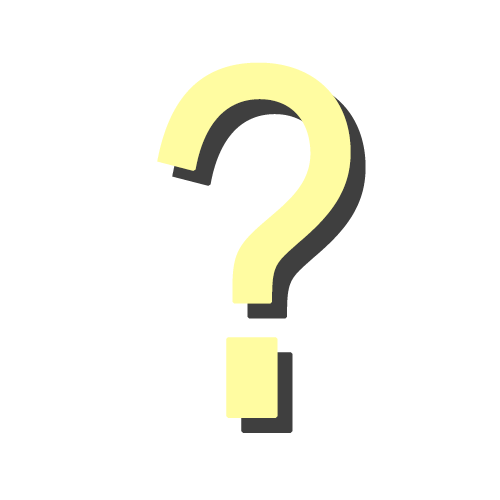
<style>
.page{position:relative;width:500px;height:500px;background:#ffffff}
.page>*{position:absolute;margin:0}
.t1{font:520px "OratorStd";color:#fffca1;font-weight:bold}
.t2{font:520px "OratorStd";font-weight:bold}
</style>
<div class="page">
<p class="t1" style="left:157px;top:62px;width:194px;height:356px">?</p>
<p class="t2" style="left:172px;top:77px;width:194px;height:356px">?</p>
</div>
